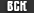
<style>
.page{position:relative;width:34px;height:13px;background:#333333}
.page>*{position:absolute;margin:0}
.t1{font:13.9px "NK_04";color:#ffffff}
</style>
<div class="page">
<p class="t1" style="left:7px;top:1px;width:20px;height:10px">ВСК</p>
</div>
